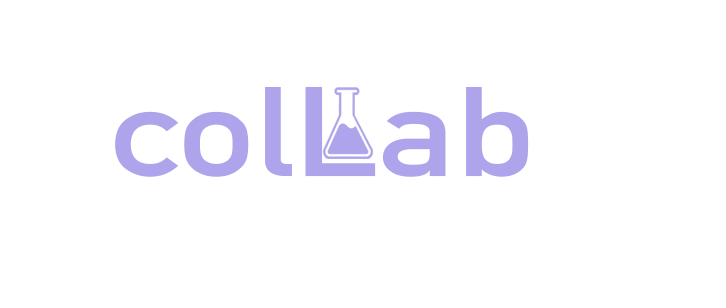
<style>
.page{position:relative;width:726px;height:308px;background:#ffffff}
.page>*{position:absolute;margin:0}
.t1{font:125px "DINAlternate-Bold";color:#ada4eb;scale:1.22 1}
</style>
<div class="page">
<p class="t1" style="left:115px;top:87px;width:414px;height:90px">colLab</p>
</div>
